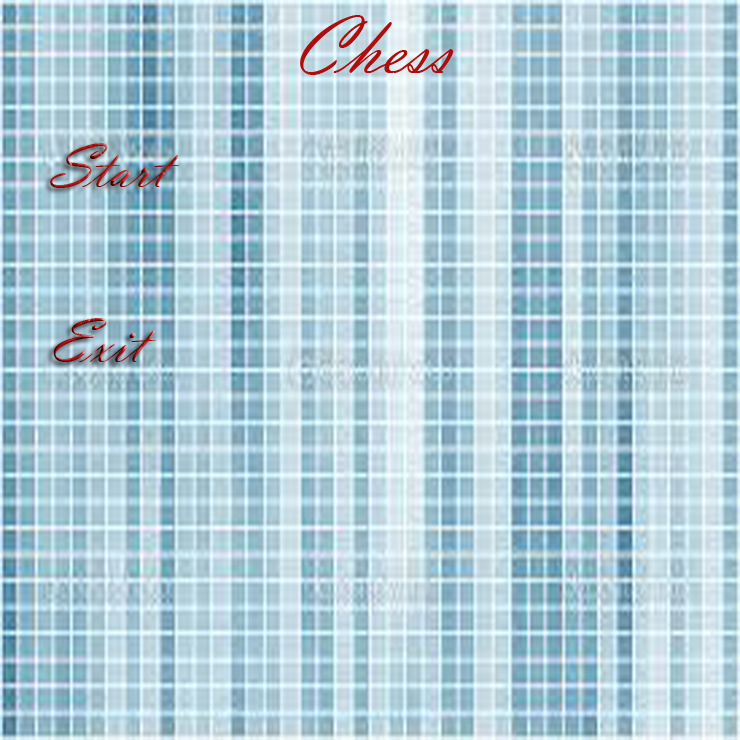
<style>
.page{position:relative;width:740px;height:740px}
.page>*{position:absolute;margin:0}
.t1{font:84.7px "VladimirScript";color:#af0c0c}
.t2{font:63.5px "VladimirScript"}
</style>
<div class="page">
<p class="t1" style="left:300px;top:15px;width:154px;height:60px">Chess</p>
<p class="t2" style="left:50px;top:143px;width:129px;height:45px">Start</p>
<p class="t2" style="left:53px;top:318px;width:103px;height:44px">Exit</p>
</div>
